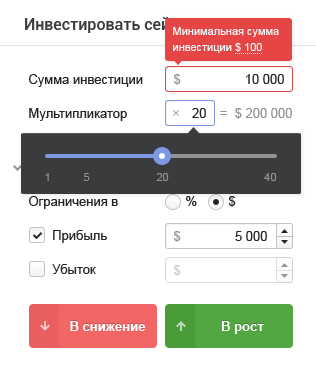
<style>
.page{position:relative;width:316px;height:368px;background:#ffffff}
.page>*{position:absolute;margin:0}
.t1{font:16px "Roboto-Medium";color:#3a3b3c}
.t2{font:11px/16px "ArialMT";color:#f0f2f4}
.t3{font:13px "ArialMT";color:#232426}
.t4{font:13px "ArialMT";color:#909294}
.t5{font:13px "ArialMT";color:#242526}
.t6{font:11px "ArialMT";color:#909294}
.t7{font:13px "ArialMT";color:#c7c8c9}
.t8{font:13px "Arial-BoldMT";color:#ffffff}
</style>
<div class="page">
<p class="t1" style="left:25px;top:17px;width:171px;height:16px">Инвестировать сейчас</p>
<p class="t2" style="left:173px;top:27px;width:106px;height:26px">Минимальная сумма<br>инвестиции $ 100</p>
<p class="t3" style="left:29px;top:74px;width:114px;height:13px">Сумма инвестиции</p>
<p class="t4" style="left:173px;top:74px;width:8px;height:11px">$</p>
<p class="t5" style="left:246px;top:74px;width:38px;height:10px">10 000</p>
<p class="t3" style="left:29px;top:108px;width:98px;height:13px">Мультипликатор</p>
<p class="t3" style="left:192px;top:108px;width:14px;height:10px">20</p>
<p class="t3" style="left:192px;top:108px;width:14px;height:10px">20</p>
<p class="t4" style="left:220px;top:108px;width:72px;height:11px">=  $ 200 000</p>
<p class="t6" style="left:45px;top:173px;width:4px;height:8px">1</p>
<p class="t6" style="left:83px;top:173px;width:7px;height:8px">5</p>
<p class="t6" style="left:156px;top:173px;width:13px;height:8px">20</p>
<p class="t6" style="left:264px;top:173px;width:13px;height:8px">40</p>
<p class="t5" style="left:29px;top:196px;width:89px;height:13px">Ограничения в</p>
<p class="t5" style="left:186px;top:196px;width:11px;height:10px">%</p>
<p class="t5" style="left:228px;top:196px;width:8px;height:11px">$</p>
<p class="t5" style="left:53px;top:230px;width:54px;height:13px">Прибыль</p>
<p class="t4" style="left:173px;top:231px;width:8px;height:11px">$</p>
<p class="t5" style="left:235px;top:231px;width:32px;height:10px">5 000</p>
<p class="t5" style="left:52px;top:264px;width:44px;height:10px">Убыток</p>
<p class="t7" style="left:173px;top:265px;width:8px;height:11px">$</p>
<p class="t8" style="left:70px;top:321px;width:75px;height:10px">В снижение</p>
<p class="t8" style="left:221px;top:321px;width:43px;height:13px">В рост</p>
</div>
